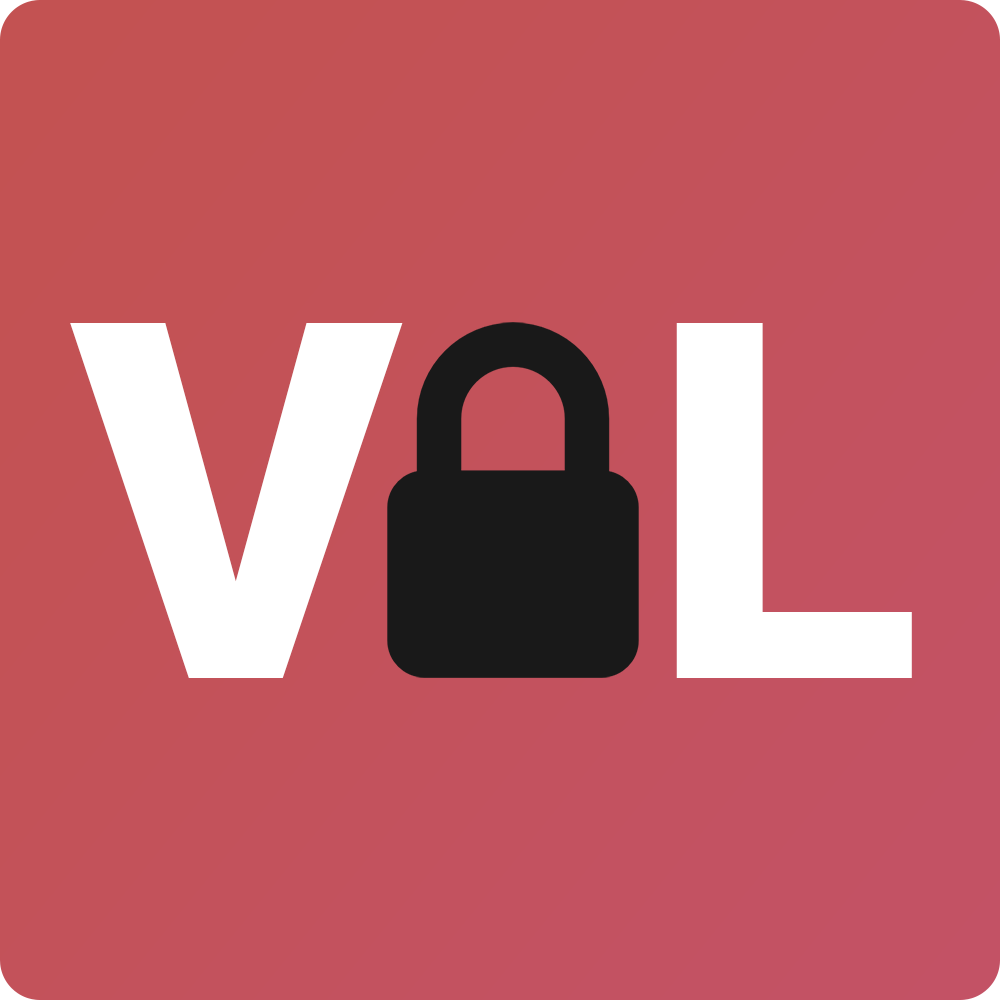
<style>
.page{position:relative;width:1000px;height:1000px}
.page>*{position:absolute;margin:0}
.t1{font:500px "Roboto-Black";color:#ffffff;text-transform:uppercase}
</style>
<div class="page">
<p class="t1" style="left:70px;top:323px;width:842px;height:355px">V  L</p>
</div>
